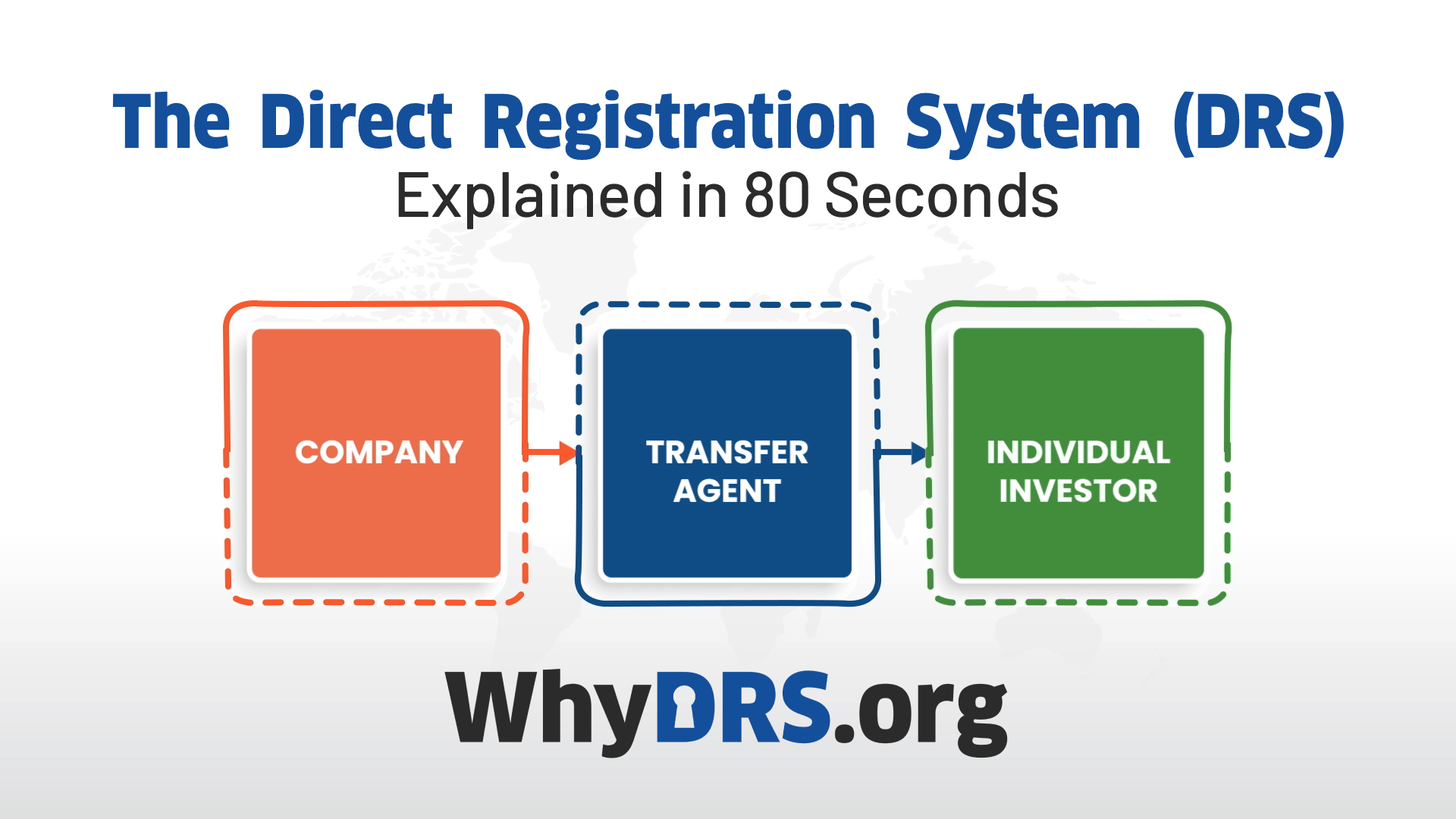
<style>
.page{position:relative;width:1456px;height:819px;background:#ffffff}
.page>*{position:absolute;margin:0}
.t1{font:72px "ClanPro-Black";color:#144f9b;scale:0.9 1}
.t2{font:64px "Barlow-Medium";color:#2b2b2b}
</style>
<div class="page">
<p class="t1" style="left:112px;top:89px;width:1232px;height:72px">The Direct Registration System (DRS)</p>
<p class="t2" style="left:398px;top:171px;width:660px;height:59px">Explained in 80 Seconds</p>
</div>
